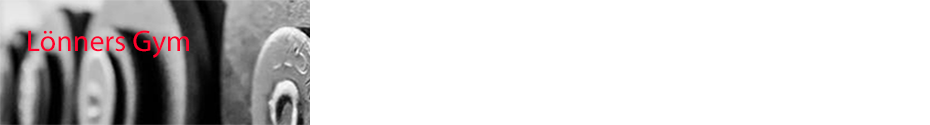
<style>
.page{position:relative;width:930px;height:125px;background:#ffffff}
.page>*{position:absolute;margin:0}
.t1{font:30px "MyriadPro-Regular";color:#ff002a}
</style>
<div class="page">
<p class="t1" style="left:28px;top:30px;width:161px;height:28px">Lönners Gym</p>
</div>
